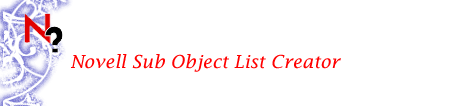
<style>
.page{position:relative;width:453px;height:106px;background:#ffffff}
.page>*{position:absolute;margin:0}
.t1{font:18px "LucidaFax-Italic";color:#ff0000}
</style>
<div class="page">
<p class="t1" style="left:71px;top:54px;width:270px;height:18px">Novell Sub Object List Creator</p>
</div>
